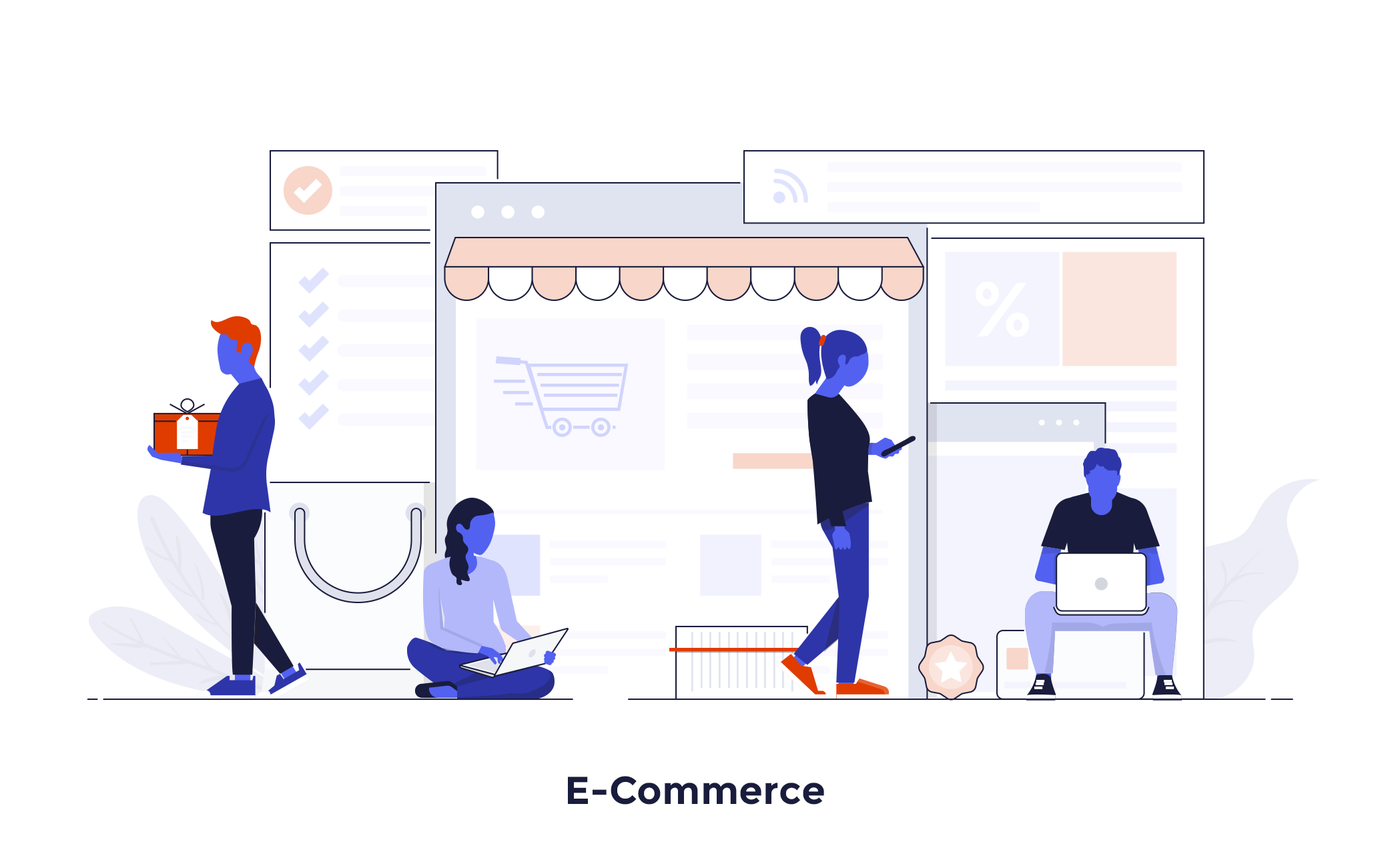
<style>
.page{position:relative;width:1390px;height:858px;background:#ffffff}
.page>*{position:absolute;margin:0}
.t1{font:38.9px "Montserrat-Bold";color:#191c3c}
</style>
<div class="page">
<p class="t1" style="left:568px;top:776px;width:256px;height:29px">E-Commerce</p>
</div>
